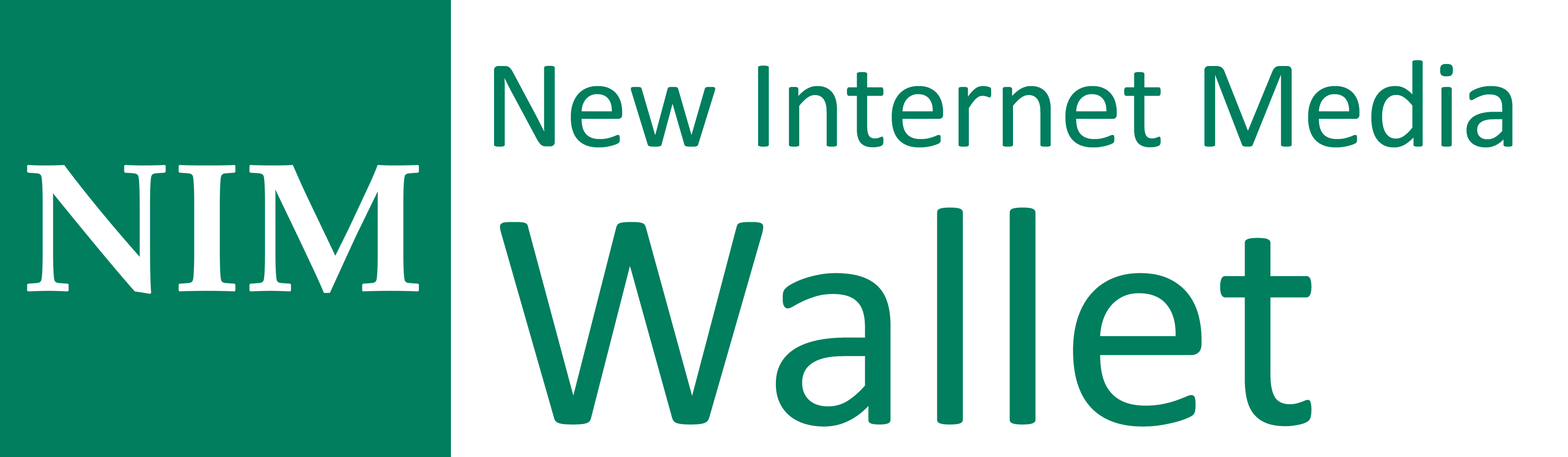
<style>
.page{position:relative;width:1568px;height:457px;background:#ffffff}
.page>*{position:absolute;margin:0}
.t1{font:126.9px "Calibri";color:#007e5e}
.t2{font:317.4px "Calibri";color:#007e5e}
</style>
<div class="page">
<p class="t1" style="left:494px;top:60px;width:1019px;height:88px">New Internet Media</p>
<p class="t2" style="left:500px;top:207px;width:812px;height:220px">Wallet</p>
</div>
